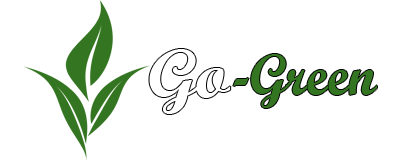
<style>
.page{position:relative;width:400px;height:160px;background:#ffffff}
.page>*{position:absolute;margin:0}
.t1{font:57.4px "ScriptMTBold";color:#347521}
</style>
<div class="page">
<p class="t1" style="left:233px;top:54px;width:144px;height:54px">-Green</p>
</div>
